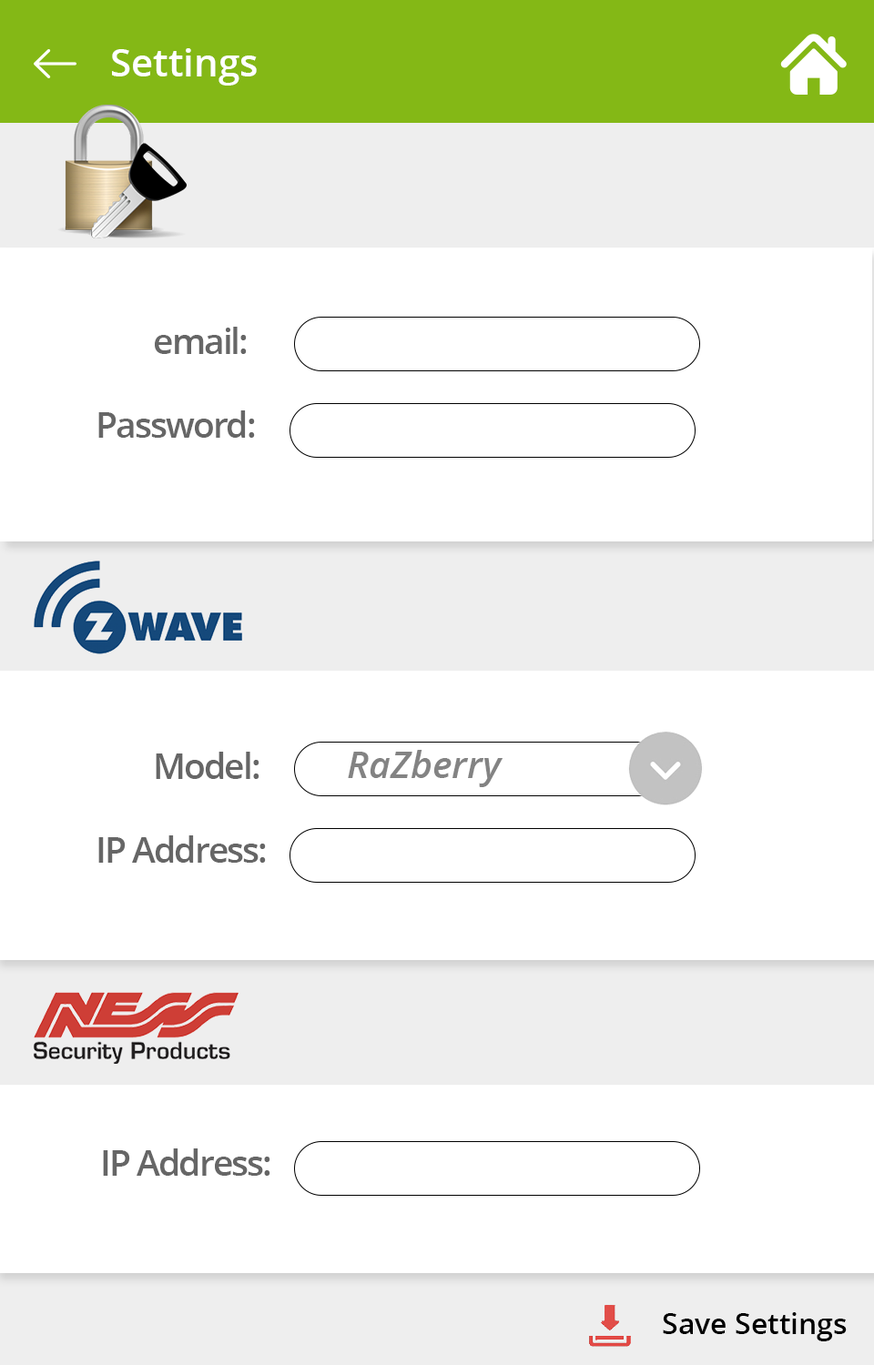
<style>
.page{position:relative;width:874px;height:1365px;background:#ffffff}
.page>*{position:absolute;margin:0}
.t1{font:38.2px "OpenSans-Semibold";color:#ffffff}
.t2{font:35.5px "OpenSans-Semibold";letter-spacing:-0.05em;color:#666666}
.t3{font:37.3px "OpenSans-SemiboldItalic";color:#838383}
.t4{font:29.1px "OpenSans-Semibold";color:#000000}
</style>
<div class="page">
<p class="t1" style="left:112px;top:48px;width:145px;height:38px">Settings</p>
<p class="t2" style="left:155px;top:327px;width:92px;height:27px">email:</p>
<p class="t2" style="left:98px;top:410px;width:157px;height:28px">Password:</p>
<p class="t3" style="left:348px;top:750px;width:154px;height:37px">RaZberry</p>
<p class="t2" style="left:156px;top:752px;width:103px;height:27px">Model:</p>
<p class="t2" style="left:98px;top:835px;width:168px;height:28px">IP Address:</p>
<p class="t2" style="left:103px;top:1148px;width:167px;height:28px">IP Address:</p>
<p class="t4" style="left:662px;top:1312px;width:184px;height:29px">Save Settings</p>
</div>
